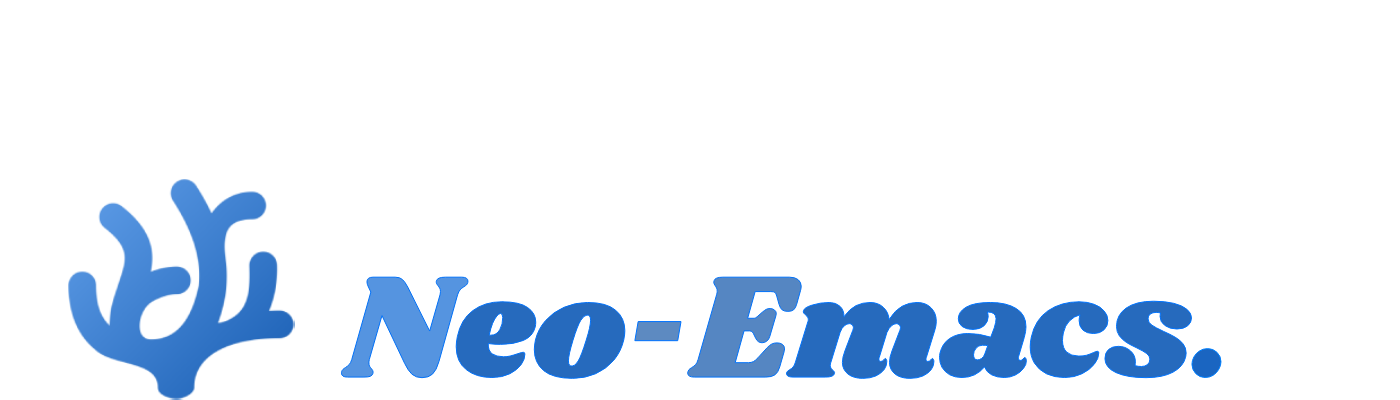
<style>
.page{position:relative;width:1400px;height:400px;background:#ffffff}
.page>*{position:absolute;margin:0}
.t1{font:141px "Shrikhand-Regular";color:#266abd}
.t2{font:150px "Shrikhand-Regular";color:#5594e0}
.t3{font:150px "Roboto-BlackItalic";color:#5d8ac1}
.t4{font:150px "Shrikhand-Regular";color:#5586c2}
.t5{font:141px "Shrikhand-Regular";color:#1a65c1}
</style>
<div class="page">
<p class="t1" style="left:340px;top:276px;width:882px;height:104px"><span class="t2">N</span>eo<span class="t3">-</span><span class="t4">E</span>macs<span class="t5">.</span></p>
</div>
